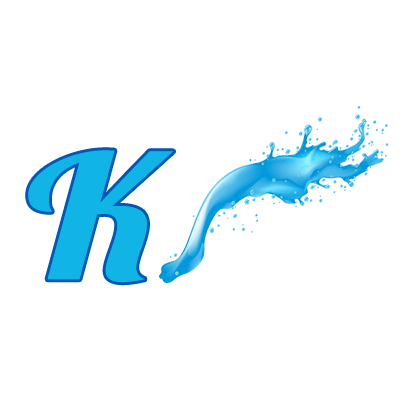
<style>
.page{position:relative;width:400px;height:400px;background:#ffffff}
.page>*{position:absolute;margin:0}
.t1{font:171.6px "Lobster1.4";color:#10b5e5;scale:1.28 1}
</style>
<div class="page">
<p class="t1" style="left:28px;top:150px;width:146px;height:133px">K</p>
</div>
